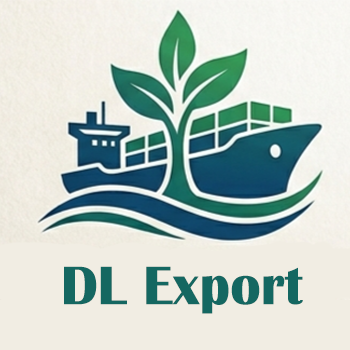
<style>
.page{position:relative;width:350px;height:350px;background:#f1ede3}
.page>*{position:absolute;margin:0}
.t1{font:56.3px "BritannicBold";color:#146761}
</style>
<div class="page">
<p class="t1" style="left:64px;top:266px;width:239px;height:48px">DL Export</p>
</div>
